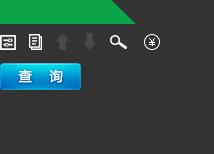
<style>
.page{position:relative;width:214px;height:154px;background:#333333}
.page>*{position:absolute;margin:0}
.t1{font:10.7px "MicrosoftYaHei";color:#ffffff}
.t2{font:13.2px "MicrosoftYaHei";letter-spacing:0.1em;color:#ffffff}
</style>
<div class="page">
<p class="t1" style="left:149px;top:38px;width:6px;height:8px">￥</p>
<p class="t2" style="left:18px;top:69px;width:45px;height:14px">查   询</p>
</div>
